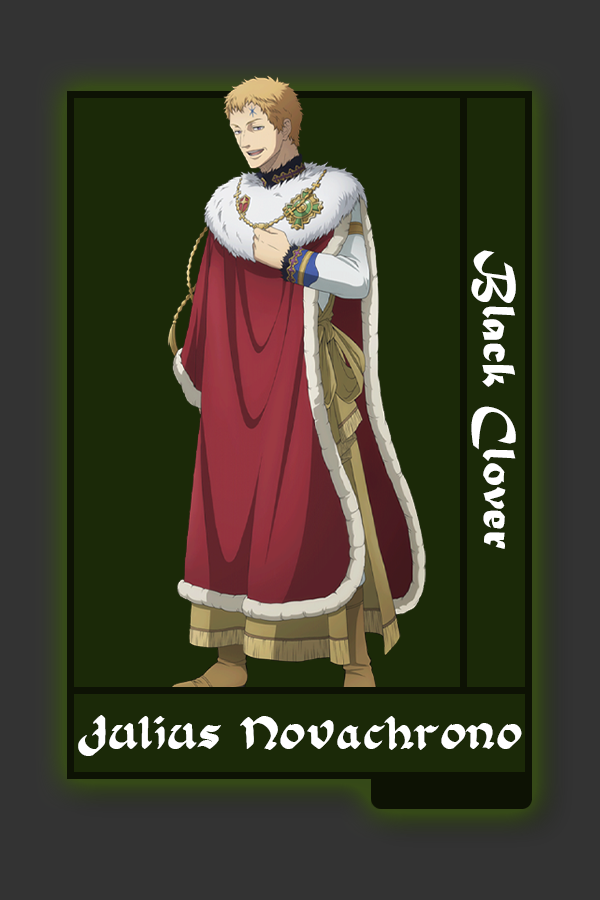
<style>
.page{position:relative;width:600px;height:900px;background:#1b2908}
.page>*{position:absolute;margin:0}
.t1{font:48.8px "MaturaMTScriptCapitals";color:#ffffff}
.t2{font:40px "FloranteatLaura";color:#ffffff}
</style>
<div class="page">
<p class="t1" style="left:471px;top:250px;width:45px;height:299px;rotate:90deg">Black Clover</p>
<p class="t2" style="left:78px;top:715px;width:444px;height:41px">Julius Novachrono</p>
</div>
